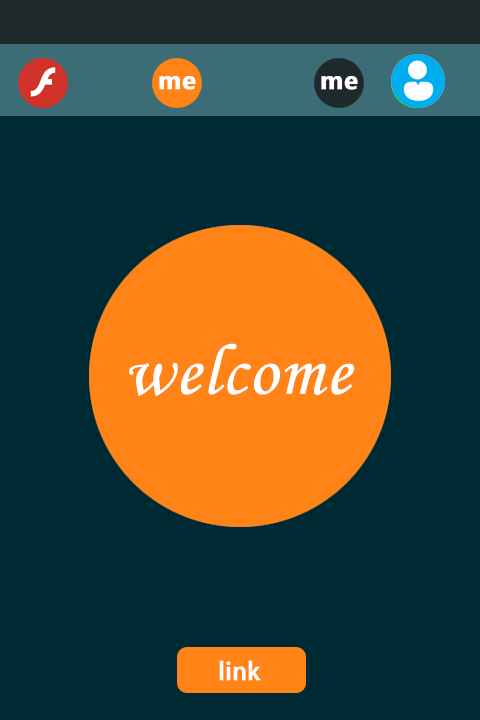
<style>
.page{position:relative;width:480px;height:720px;background:#002a33}
.page>*{position:absolute;margin:0}
.t1{font:72.6px "MonotypeCorsiva";color:#ffffff;font-weight:bold}
.t2{font:24px "AdobeHeitiStd-Regular";color:#ffffff;font-weight:bold}
</style>
<div class="page">
<p class="t1" style="left:129px;top:343px;width:226px;height:53px">welcome</p>
<p class="t2" style="left:219px;top:660px;width:42px;height:21px">link</p>
</div>
